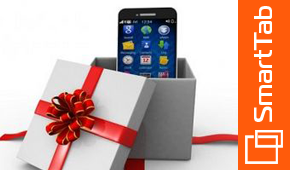
<style>
.page{position:relative;width:290px;height:170px;background:#ffffff}
.page>*{position:absolute;margin:0}
.t1{font:24.8px "MagistralC-Bold";color:#ffffff;scale:1.07 1}
</style>
<div class="page">
<p class="t1" style="left:254px;top:6px;width:18px;height:116px;rotate:-90deg">SmartTab</p>
</div>
